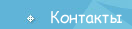
<style>
.page{position:relative;width:132px;height:29px;background:#60b4d8}
.page>*{position:absolute;margin:0}
.t1{font:16px "ComicSansMS";color:#ffffff}
</style>
<div class="page">
<p class="t1" style="left:51px;top:11px;width:71px;height:13px">Контакты</p>
</div>
